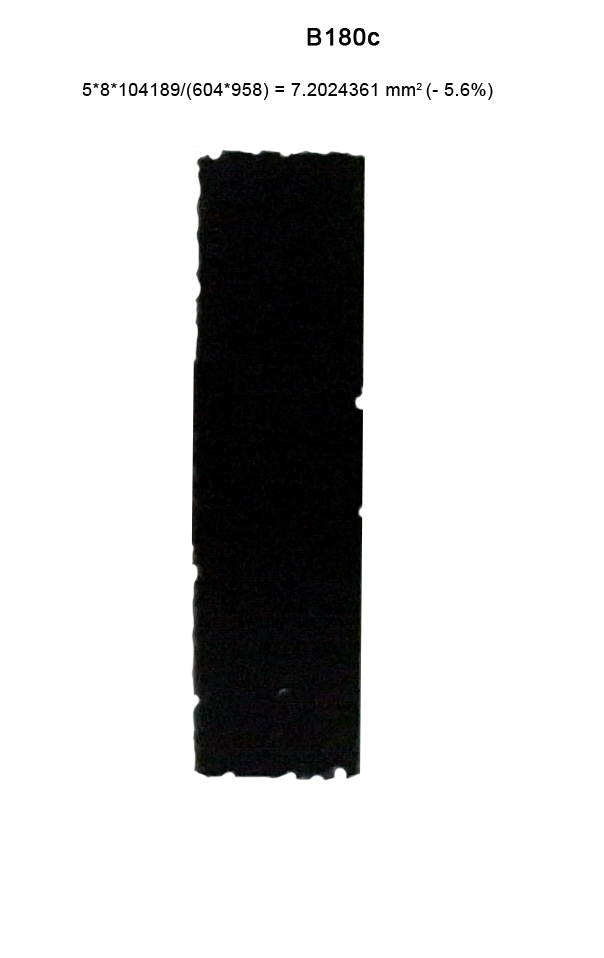
<style>
.page{position:relative;width:604px;height:958px;background:#ffffff}
.page>*{position:absolute;margin:0}
.t1{font:24px "ArialMT";letter-spacing:0.025em;color:#000000;font-weight:bold}
.t2{font:18px "ArialMT";letter-spacing:0.025em;color:#000000}
</style>
<div class="page">
<p class="t1" style="left:307px;top:28px;width:73px;height:18px">B180c</p>
<p class="t2" style="left:82px;top:83px;width:411px;height:17px">5*8*104189/(604*958) = 7.2024361 mm2 (- 5.6%)</p>
</div>
